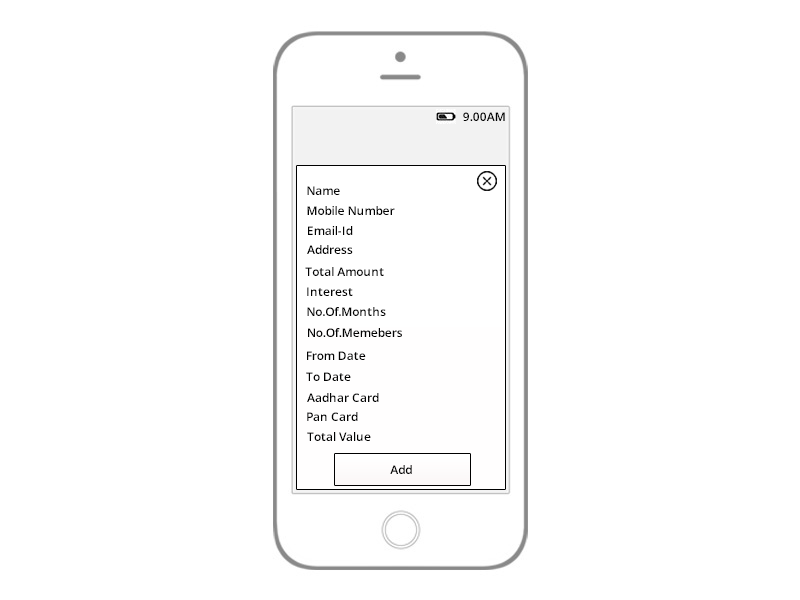
<style>
.page{position:relative;width:800px;height:600px;background:#ffffff}
.page>*{position:absolute;margin:0}
.t1{font:12px "OpenSans-Semibold";color:#030303}
</style>
<div class="page">
<p class="t1" style="left:463px;top:112px;width:42px;height:9px">9.00AM</p>
<p class="t1" style="left:307px;top:186px;width:33px;height:9px">Name</p>
<p class="t1" style="left:307px;top:206px;width:88px;height:9px">Mobile Number</p>
<p class="t1" style="left:308px;top:226px;width:45px;height:9px">Email-Id</p>
<p class="t1" style="left:307px;top:245px;width:46px;height:9px">Address</p>
<p class="t1" style="left:305px;top:267px;width:79px;height:9px">Total Amount</p>
<p class="t1" style="left:307px;top:287px;width:46px;height:9px">Interest</p>
<p class="t1" style="left:307px;top:307px;width:79px;height:9px">No.Of.Months</p>
<p class="t1" style="left:308px;top:328px;width:94px;height:9px">No.Of.Memebers</p>
<p class="t1" style="left:307px;top:351px;width:59px;height:9px">From Date</p>
<p class="t1" style="left:306px;top:372px;width:45px;height:9px">To Date</p>
<p class="t1" style="left:307px;top:393px;width:72px;height:9px">Aadhar Card</p>
<p class="t1" style="left:307px;top:412px;width:51px;height:9px">Pan Card</p>
<p class="t1" style="left:307px;top:432px;width:64px;height:9px">Total Value</p>
<p class="t1" style="left:390px;top:465px;width:22px;height:9px">Add</p>
</div>
